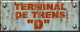
<style>
.page{position:relative;width:80px;height:32px}
.page>*{position:absolute;margin:0}
.t1{font:8.5px/8px "Arial-Black";color:#9c3910;scale:1.05 1}
</style>
<div class="page">
<p class="t1" style="left:14px;top:3px;width:53px;height:16px;text-align:center">TERMINAL<br>DE TRENS</p>
</div>
